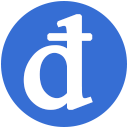
<style>
.page{position:relative;width:128px;height:128px;background:#366ed4}
.page>*{position:absolute;margin:0}
.t1{font:129px "TimesNewRomanPSMT";letter-spacing:-0.06em;color:#ffffff;font-weight:bold;scale:1.07 1}
</style>
<div class="page">
<p class="t1" style="left:23px;top:14px;width:70px;height:96px">đ</p>
</div>
